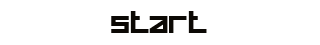
<style>
.page{position:relative;width:320px;height:45px;background:#ffffff}
.page>*{position:absolute;margin:0}
.t1{font:21.6px "HappyKiller";color:#0c0905}
</style>
<div class="page">
<p class="t1" style="left:111px;top:11px;width:96px;height:22px">start</p>
</div>
